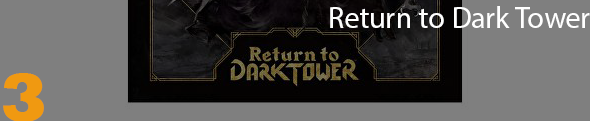
<style>
.page{position:relative;width:590px;height:121px;background:#7f7f7f}
.page>*{position:absolute;margin:0}
.t1{font:30px "MyriadPro-Regular";color:#ffffff}
.t2{font:70px "Rockwell-ExtraBold";color:#f09911}
</style>
<div class="page">
<p class="t1" style="left:330px;top:6px;width:260px;height:22px">Return to Dark Tower</p>
<p class="t2" style="left:3px;top:73px;width:41px;height:49px">3</p>
</div>
